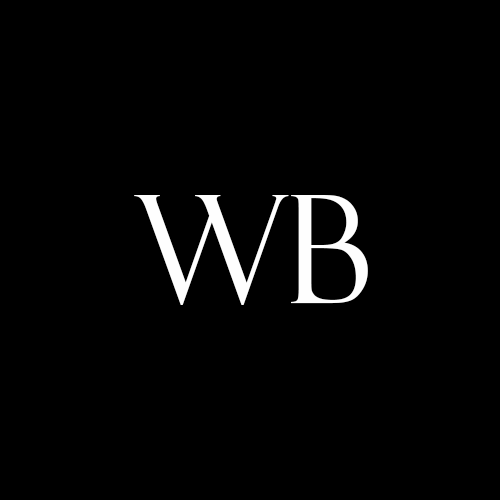
<style>
.page{position:relative;width:500px;height:500px;background:#000000}
.page>*{position:absolute;margin:0}
.t1{font:150px "FelixTitlingMT";letter-spacing:-0.025em;color:#fefefe}
</style>
<div class="page">
<p class="t1" style="left:134px;top:195px;width:234px;height:110px">WB</p>
</div>
